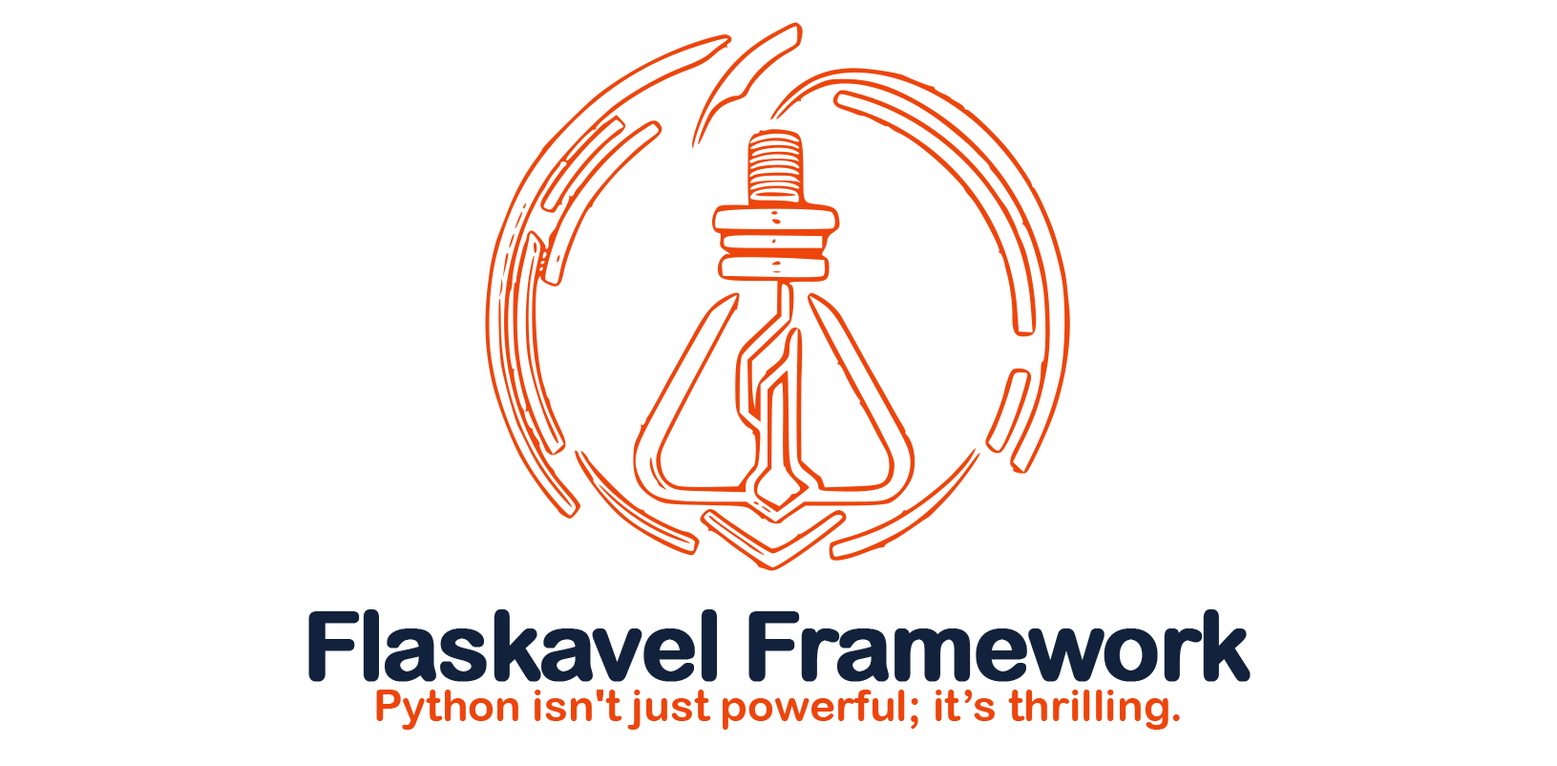
<style>
.page{position:relative;width:1557px;height:766px;background:#ffffff}
.page>*{position:absolute;margin:0}
.t1{font:95.5px "ArialRoundedMTBold";letter-spacing:-0.04em;color:#13223c;font-weight:bold}
.t2{font:43.9px "ArialRoundedMTBold";color:#ed450c}
</style>
<div class="page">
<p class="t1" style="left:308px;top:609px;width:943px;height:73px">Flaskavel Framework</p>
<p class="t2" style="left:376px;top:689px;width:804px;height:40px">Python isn't just powerful; it’s thrilling.</p>
</div>
